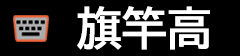
<style>
.page{position:relative;width:240px;height:56px;background:#000000}
.page>*{position:absolute;margin:0}
.t1{font:44.8px "BIZ-UDPGothic-Bold";color:#ffffff}
</style>
<div class="page">
<p class="t1" style="left:77px;top:6px;width:133px;height:44px">旗竿高</p>
</div>
